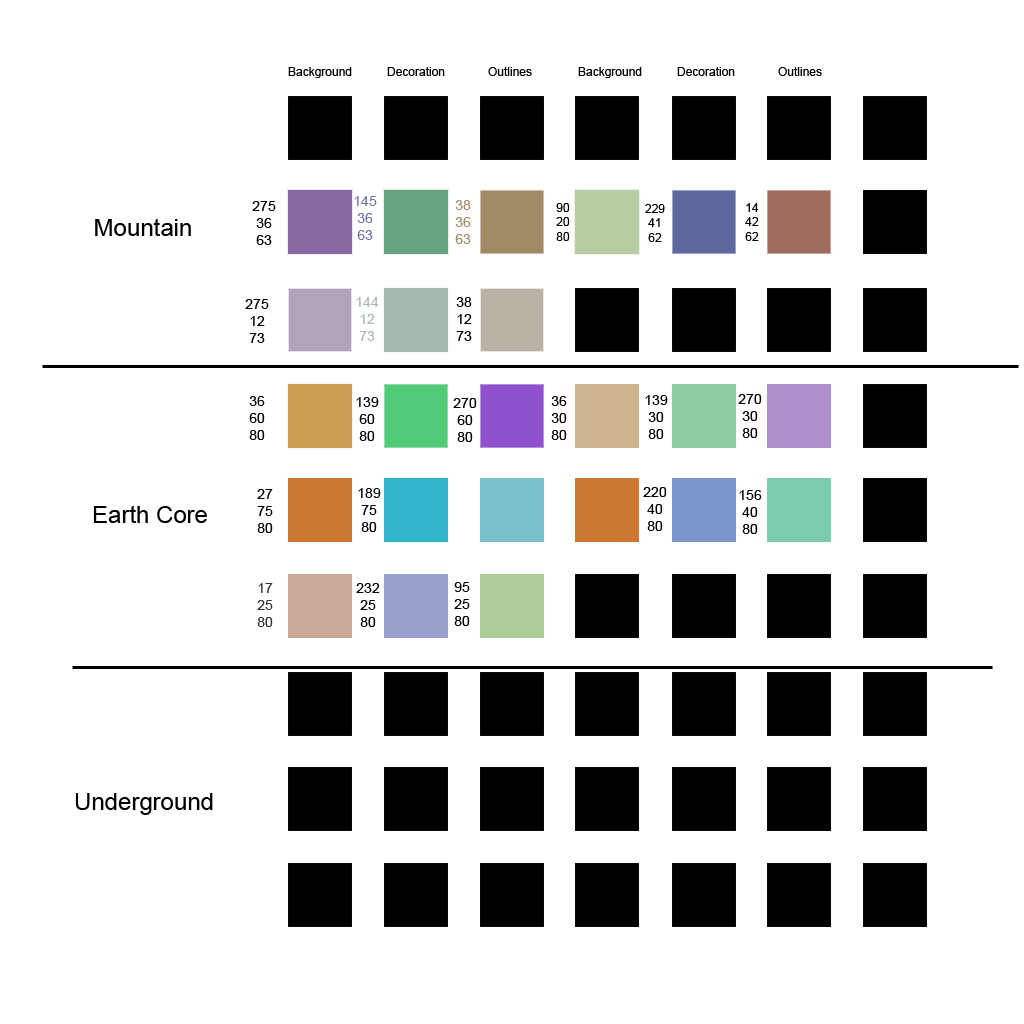
<style>
.page{position:relative;width:1024px;height:1024px;background:#ffffff}
.page>*{position:absolute;margin:0}
.t1{font:12px "ArialMT";color:#000000}
.t2{font:14px "ArialMT";color:#6d74a5}
.t3{font:14px "ArialMT";color:#000000}
.t4{font:14px "ArialMT";color:#a18b67}
.t5{font:24px "ArialMT";color:#000000}
.t6{font:14px "ArialMT";color:#a3b9ac}
.t7{font:14px "ArialMT";color:#333333}
</style>
<div class="page">
<p class="t1" style="left:288px;top:67px;width:64px;height:11px">Background</p>
<p class="t1" style="left:387px;top:67px;width:58px;height:9px">Decoration</p>
<p class="t1" style="left:488px;top:67px;width:44px;height:9px">Outlines</p>
<p class="t1" style="left:578px;top:67px;width:64px;height:11px">Background</p>
<p class="t1" style="left:677px;top:67px;width:58px;height:9px">Decoration</p>
<p class="t1" style="left:778px;top:67px;width:44px;height:9px">Outlines</p>
<p class="t2" style="left:354px;top:196px;width:23px;height:44px;text-align:center">145<br>36<br>63</p>
<p class="t3" style="left:252px;top:201px;width:24px;height:44px;text-align:center">275<br>36<br>63</p>
<p class="t4" style="left:455px;top:200px;width:16px;height:44px;text-align:center">38<br>36<br>63</p>
<p class="t1" style="left:556px;top:203px;width:14px;height:38px;text-align:center">90<br>20<br>80</p>
<p class="t1" style="left:645px;top:204px;width:20px;height:38px;text-align:center">229<br>41<br>62</p>
<p class="t1" style="left:745px;top:203px;width:14px;height:38px;text-align:center">14<br>42<br>62</p>
<p class="t5" style="left:95px;top:218px;width:96px;height:18px">Mountain</p>
<p class="t3" style="left:245px;top:299px;width:24px;height:44px;text-align:center">275<br>12<br>73</p>
<p class="t6" style="left:356px;top:297px;width:23px;height:44px;text-align:center">144<br>12<br>73</p>
<p class="t3" style="left:456px;top:297px;width:16px;height:44px;text-align:center">38<br>12<br>73</p>
<p class="t3" style="left:249px;top:396px;width:16px;height:44px;text-align:center">36<br>60<br>80</p>
<p class="t3" style="left:356px;top:397px;width:23px;height:44px;text-align:center">139<br>60<br>80</p>
<p class="t3" style="left:453px;top:398px;width:24px;height:44px;text-align:center">270<br>60<br>80</p>
<p class="t3" style="left:551px;top:396px;width:16px;height:44px;text-align:center">36<br>30<br>80</p>
<p class="t3" style="left:645px;top:395px;width:23px;height:44px;text-align:center">139<br>30<br>80</p>
<p class="t3" style="left:738px;top:394px;width:24px;height:44px;text-align:center">270<br>30<br>80</p>
<p class="t3" style="left:257px;top:489px;width:16px;height:44px;text-align:center">27<br>75<br>80</p>
<p class="t3" style="left:358px;top:488px;width:23px;height:44px;text-align:center">189<br>75<br>80</p>
<p class="t3" style="left:643px;top:487px;width:24px;height:44px;text-align:center">220<br>40<br>80</p>
<p class="t3" style="left:739px;top:490px;width:23px;height:44px;text-align:center">156<br>40<br>80</p>
<p class="t5" style="left:93px;top:505px;width:114px;height:18px">Earth Core</p>
<p class="t3" style="left:454px;top:582px;width:16px;height:44px;text-align:center">95<br>25<br>80</p>
<p class="t7" style="left:257px;top:583px;width:16px;height:44px;text-align:center">17<br>25<br>80</p>
<p class="t3" style="left:356px;top:583px;width:24px;height:44px;text-align:center">232<br>25<br>80</p>
<p class="t5" style="left:75px;top:793px;width:138px;height:22px">Underground</p>
</div>
